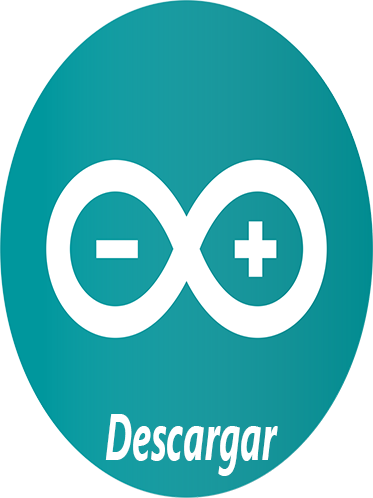
<style>
.page{position:relative;width:373px;height:498px;background:#ffffff}
.page>*{position:absolute;margin:0}
.t1{font:64.7px "SegoeUI-BoldItalic";color:#ffffff;scale:0.56 1}
</style>
<div class="page">
<p class="t1" style="left:105px;top:414px;width:173px;height:62px">Descargar</p>
</div>
